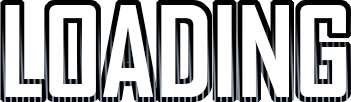
<style>
.page{position:relative;width:351px;height:102px;background:#ffffff}
.page>*{position:absolute;margin:0}
.t1{font:120px "AgencyFB-Bold";color:#ffffff}
</style>
<div class="page">
<p class="t1" style="left:5px;top:5px;width:341px;height:92px">LOADING</p>
</div>
